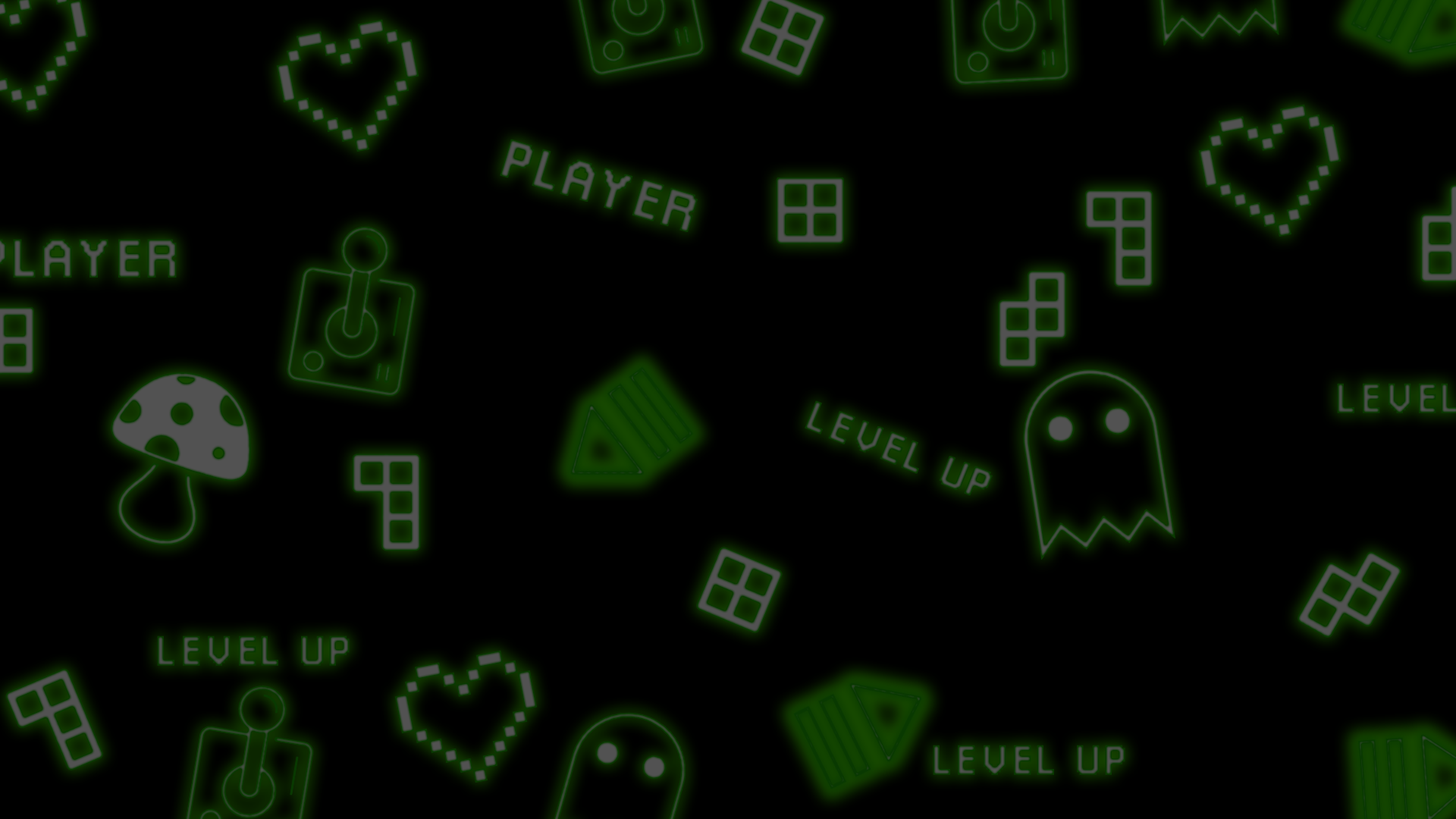
<style>
.page{position:relative;width:1456px;height:819px;background:#000000}
.page>*{position:absolute;margin:0}
.t1{font:54.6px "Pixellari";letter-spacing:0.01em;font-weight:bold}
.t2{font:42.3px "Pixellari";letter-spacing:0.01em;font-weight:bold}
</style>
<div class="page">
<p class="t1" style="left:500px;top:139px;width:198px;height:93px;rotate:17deg">PLAYER</p>
<p class="t2" style="left:805px;top:400px;width:188px;height:96px;rotate:22deg">LEVEL UP</p>
<p class="t2" style="left:157px;top:635px;width:193px;height:31px">LEVEL UP</p>
<p class="t2" style="left:933px;top:745px;width:192px;height:30px">LEVEL UP</p>
</div>
